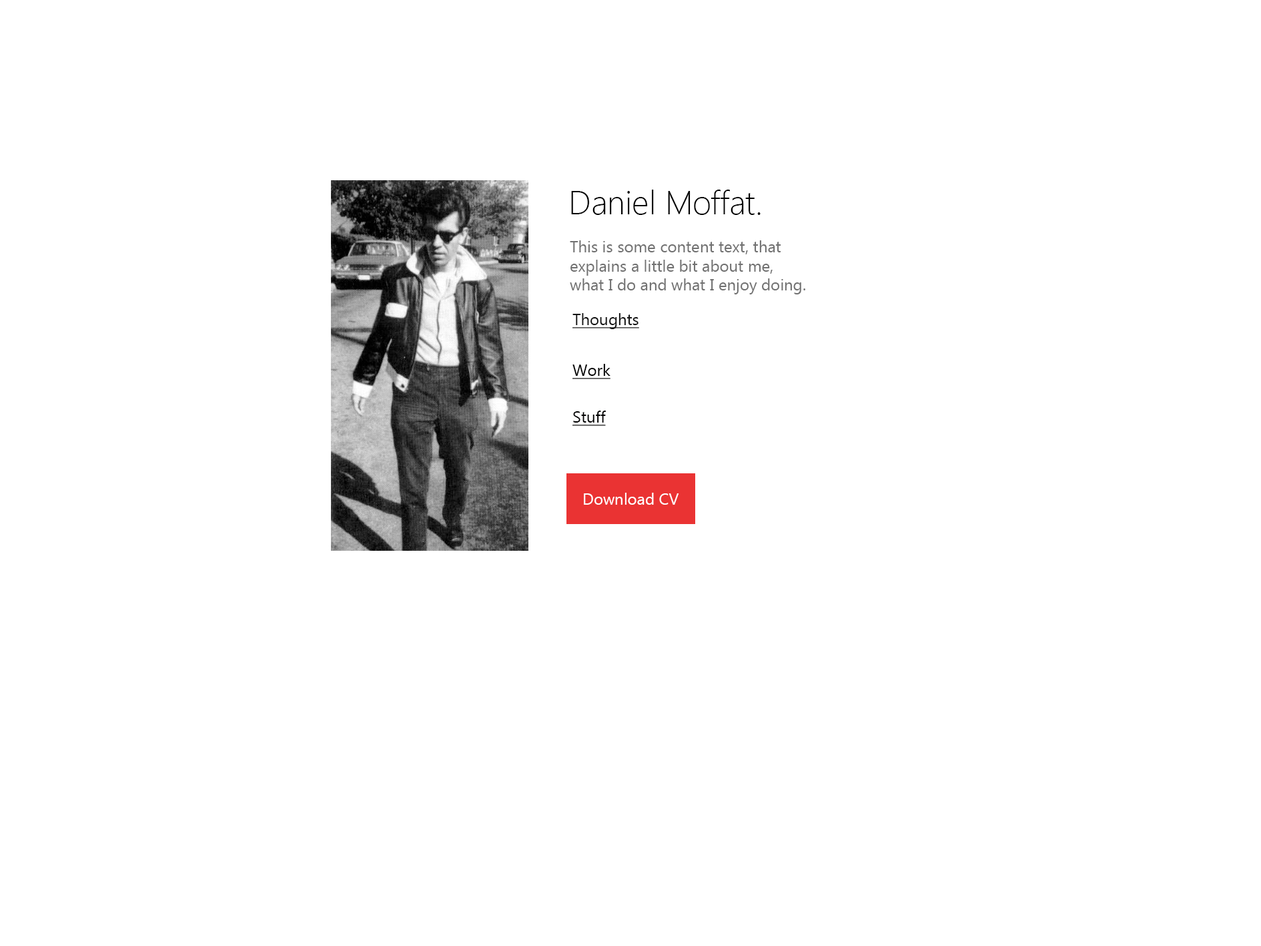
<style>
.page{position:relative;width:1261px;height:946px;background:#ffffff}
.page>*{position:absolute;margin:0}
.t1{font:8px "SegoeUI-Light";color:#000000}
.t2{font:16px "LaoUI";color:#717171}
.t3{font:16px "LaoUI";color:#141414}
.t4{font:16px "LaoUI";color:#000000}
.t5{font:16px "LaoUI";color:#010001}
.t6{font:16px "LaoUI";color:#ffffff}
</style>
<div class="page">
<p class="t1" style="left:571px;top:190px;width:190px;height:25px">Daniel Moffat.</p>
<p class="t2" style="left:570px;top:240px;width:235px;height:54px">This is some content text, that<br>explains a little bit about me, <br>what I do and what I enjoy doing.</p>
<p class="t3" style="left:573px;top:313px;width:66px;height:16px">Thoughts</p>
<p class="t4" style="left:573px;top:364px;width:38px;height:15px">Work</p>
<p class="t5" style="left:573px;top:410px;width:33px;height:16px">Stuff</p>
<p class="t6" style="left:584px;top:492px;width:95px;height:12px">Download CV</p>
</div>
